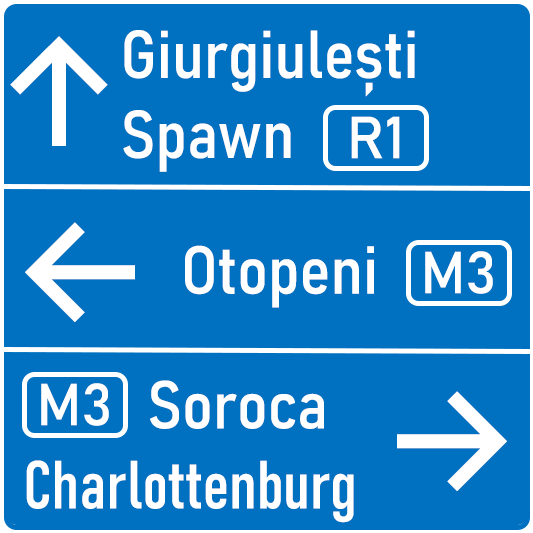
<style>
.page{position:relative;width:533px;height:533px;background:#0070c0}
.page>*{position:absolute;margin:0}
.t1{font:66.7px "Bahnschrift-SemiCondensed";color:#ffffff}
.t2{font:150px "Inter-Medium";color:#ffffff}
.t3{font:58.3px "Bahnschrift";color:#ffffff}
.t4{font:66.7px "Bahnschrift-Condensed";color:#ffffff}
</style>
<div class="page">
<p class="t1" style="left:123px;top:30px;width:292px;height:142px">Giurgiulești<br>Spawn</p>
<p class="t2" style="left:10px;top:36px;width:98px;height:110px">↑</p>
<p class="t3" style="left:351px;top:116px;width:49px;height:43px">R1</p>
<p class="t2" style="left:25px;top:222px;width:110px;height:100px">←</p>
<p class="t1" style="left:185px;top:245px;width:189px;height:63px">Otopeni</p>
<p class="t3" style="left:425px;top:251px;width:68px;height:43px">M3</p>
<p class="t4" style="left:26px;top:380px;width:328px;height:143px"><span class="t1"> Soroca<br></span>Charlottenburg</p>
<p class="t3" style="left:41px;top:383px;width:68px;height:43px">M3</p>
<p class="t2" style="left:397px;top:391px;width:110px;height:100px">→</p>
</div>
